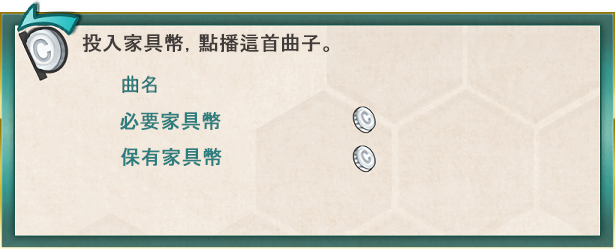
<style>
.page{position:relative;width:615px;height:249px}
.page>*{position:absolute;margin:0}
.t1{font:20px "MS-UIGothic";color:#413c39;font-weight:bold}
.t2{font:20px "MS-UIGothic";color:#2c7d7d;font-weight:bold}
</style>
<div class="page">
<p class="t1" style="left:82px;top:33px;width:248px;height:20px">投入家具幣，點播這首曲子。</p>
<p class="t2" style="left:120px;top:112px;width:101px;height:18px">必要家具幣</p>
<p class="t2" style="left:121px;top:147px;width:101px;height:19px">保有家具幣</p>
</div>
